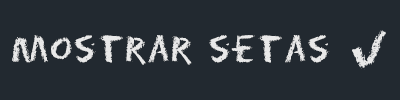
<style>
.page{position:relative;width:400px;height:100px;background:#222930}
.page>*{position:absolute;margin:0}
.t1{font:34.5px "Eraser-Regular";letter-spacing:0.05em;color:#e9e9e9}
</style>
<div class="page">
<p class="t1" style="left:12px;top:35px;width:318px;height:30px">mostrar setas</p>
</div>
